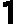
<style>
.page{position:relative;width:18px;height:24px;background:#ffffff}
.page>*{position:absolute;margin:0}
.t1{font:33.3px "Scandia-Medium";letter-spacing:-0.05em;color:#000000;font-weight:bold}
</style>
<div class="page">
<p class="t1" style="left:3px;top:0px;width:10px;height:24px">1</p>
</div>
